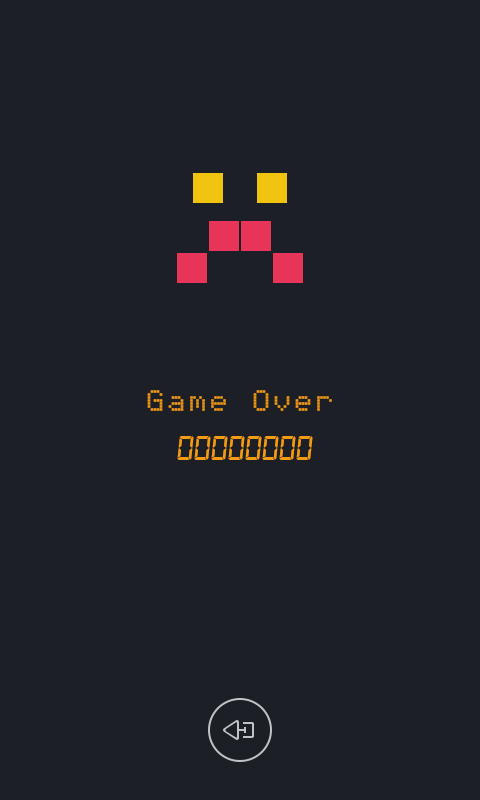
<style>
.page{position:relative;width:480px;height:800px;background:#1c1f26}
.page>*{position:absolute;margin:0}
.t1{font:24px "Erbos-Draco-1st-Open-NBP";color:#f39c12}
.t2{font:36px "Digital-7Italic";color:#f39c12}
</style>
<div class="page">
<p class="t1" style="left:147px;top:390px;width:185px;height:21px">Game Over</p>
<p class="t2" style="left:177px;top:436px;width:136px;height:24px">00000000</p>
</div>
